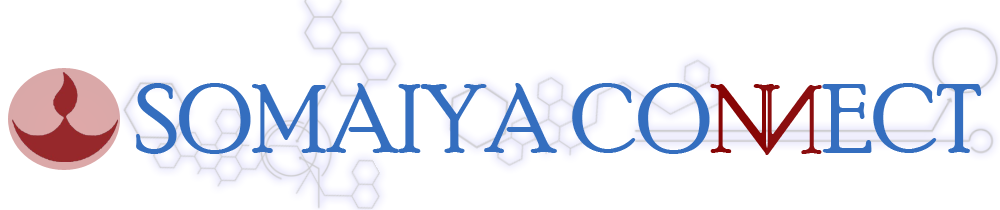
<style>
.page{position:relative;width:1000px;height:210px;background:#ffffff}
.page>*{position:absolute;margin:0}
.t1{font:96.3px "PoorRichard-Regular";color:#346ebf}
.t2{font:96.3px "PoorRichard-Regular";color:#870505}
.t3{font:96.3px "PoorRichard-Regular";color:#8b0e0f}
</style>
<div class="page">
<p class="t1" style="left:136px;top:83px;width:846px;height:71px">SOMAIYA CO<span class="t2">N</span>   ECT</p>
<p class="t3" style="left:759px;top:85px;width:63px;height:70px;rotate:180deg">N</p>
</div>
